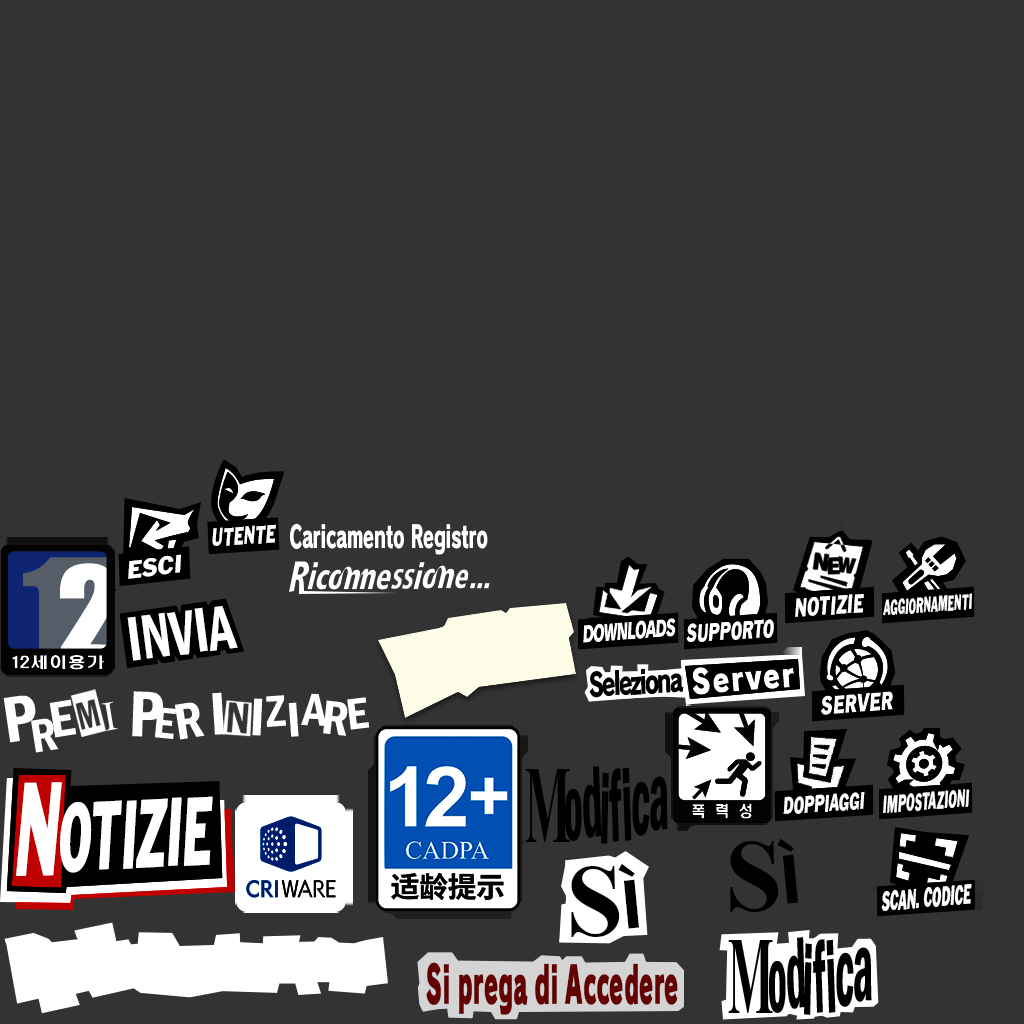
<style>
.page{position:relative;width:1024px;height:1024px;background:#333333}
.page>*{position:absolute;margin:0}
.t1{font:26.4px "FranklinGothicITALIC";color:#ffffff;scale:0.65 1}
.t2{font:30.5px "RodinCattleyaPro-EB";color:#ffffff;scale:0.57 1}
.t3{font:26.2px "FranklinGothicITALIC";color:#ffffff}
.t4{font:22.7px "FranklinGothicITALIC";color:#ffffff;scale:0.5 1}
.t5{font:64.8px "FranklinGothic-DemiCond";color:#ffffff;scale:0.8 1}
.t6{font:27.3px "FranklinGothicITALIC";color:#ffffff;scale:0.69 1}
.t7{font:31.7px "RodinCattleyaPro-EB";letter-spacing:-0.1em;color:#000000;scale:0.69 1}
.t8{font:67.2px "FranklinGothic-DemiCond";color:#ffffff}
.t9{font:52.4px "FranklinGothic-DemiCond";color:#ffffff}
.t10{font:41.7px "TimesNewRomanPSMT";color:#ffffff}
.t11{font:52.5px "FranklinGothic-DemiCond";color:#ffffff}
.t12{font:62.4px "FranklinGothic-DemiCond";color:#ffffff}
.t13{font:54.9px "FranklinGothic-DemiCond";color:#ffffff}
.t14{font:45.9px "FranklinGothic-DemiCond";color:#ffffff;scale:0.91 1}
.t15{font:50.5px "FranklinGothic-DemiCond";color:#ffffff}
.t16{font:47.2px "FranklinGothic-DemiCond";color:#ffffff}
.t17{font:49.5px "FranklinGothic-DemiCond";color:#ffffff}
.t18{font:45.5px "FranklinGothic-DemiCond";color:#ffffff}
.t19{font:48.3px "FranklinGothic-DemiCond";color:#ffffff}
.t20{font:109.9px "TimesNewRomanPS-BoldMT";letter-spacing:-0.1em;color:#000000;scale:0.44 1}
.t21{font:104.3px "FranklinGothic-DemiCond";color:#000000;scale:0.41 1}
.t22{font:105.2px "FranklinGothic-DemiCond";color:#000000;scale:0.41 1}
.t23{font:107.6px "FranklinGothic-DemiCond";color:#000000;scale:0.41 1}
.t24{font:139.1px "FranklinGothicITALIC";color:#ffffff;scale:0.48 1}
.t25{font:104.4px "FranklinGothic-DemiCond";color:#000000;scale:0.41 1}
.t26{font:104.5px "FranklinGothic-DemiCond";color:#000000;scale:0.41 1}
.t27{font:101.3px "FranklinGothicITALIC";color:#ffffff;scale:0.5 1}
.t28{font:100.7px "FranklinGothic-DemiCond";color:#000000;scale:0.41 1}
.t29{font:25.2px "FranklinGothicITALIC";color:#ffffff;scale:0.63 1}
.t30{font:25.5px "FranklinGothicITALIC";color:#ffffff;scale:0.5 1}
.t31{font:103.1px "TimesNewRomanPS-BoldMT";color:#000000}
.t32{font:72px "FranklinGothic-DemiCond";color:#000000}
.t33{font:28.9px "FranklinGothicITALIC";color:#ffffff;scale:0.48 1}
.t34{font:51.3px "RodinCattleyaPro-UB";color:#630000;scale:0.44 1}
</style>
<div class="page">
<p class="t1" style="left:212px;top:524px;width:64px;height:22px;rotate:-3deg">UTENTE</p>
<p class="t2" style="left:290px;top:523px;width:198px;height:32px">Caricamento Registro</p>
<p class="t3" style="left:128px;top:554px;width:53px;height:25px;rotate:-6deg">ESCI</p>
<p class="t4" style="left:883px;top:593px;width:89px;height:23px;rotate:-4deg">AGGIORNAMENTI</p>
<p class="t5" style="left:127px;top:606px;width:111px;height:55px;rotate:-7deg">INVIA</p>
<p class="t6" style="left:795px;top:594px;width:69px;height:23px;rotate:-4deg">NOTIZIE</p>
<p class="t1" style="left:686px;top:619px;width:88px;height:23px;rotate:-3deg">SUPPORTO</p>
<p class="t7" style="left:589px;top:669px;width:95px;height:29px;rotate:-3deg">Seleziona</p>
<p class="t8" style="left:3px;top:695px;width:33px;height:48px;rotate:-8deg">P</p>
<p class="t9" style="left:49px;top:699px;width:28px;height:39px;rotate:-9deg">E</p>
<p class="t10" style="left:101px;top:701px;width:17px;height:30px;rotate:-10deg">I</p>
<p class="t8" style="left:132px;top:691px;width:31px;height:46px;rotate:2deg">P</p>
<p class="t11" style="left:174px;top:702px;width:31px;height:38px;rotate:-9deg">R</p>
<p class="t12" style="left:212px;top:692px;width:12px;height:43px;rotate:-4deg">I</p>
<p class="t13" style="left:252px;top:698px;width:11px;height:38px;rotate:3deg">I</p>
<p class="t14" style="left:266px;top:695px;width:20px;height:32px;rotate:-4deg">Z</p>
<p class="t15" style="left:288px;top:702px;width:11px;height:35px;rotate:-4deg">I</p>
<p class="t16" style="left:301px;top:693px;width:26px;height:33px;rotate:2deg">A</p>
<p class="t17" style="left:323px;top:700px;width:25px;height:36px;rotate:6deg">R</p>
<p class="t18" style="left:347px;top:697px;width:23px;height:33px;rotate:-7deg">E</p>
<p class="t18" style="left:154px;top:707px;width:22px;height:32px;rotate:6deg">E</p>
<p class="t19" style="left:31px;top:718px;width:28px;height:35px;rotate:-9deg">R</p>
<p class="t20" style="left:525px;top:769px;width:45px;height:73px">M</p>
<p class="t21" style="left:583px;top:766px;width:19px;height:72px;rotate:-7deg">d</p>
<p class="t22" style="left:601px;top:772px;width:8px;height:72px;rotate:5deg">i</p>
<p class="t21" style="left:609px;top:768px;width:13px;height:74px;rotate:-7deg">f</p>
<p class="t23" style="left:622px;top:767px;width:10px;height:74px;rotate:-8deg">i</p>
<p class="t24" style="left:16px;top:782px;width:46px;height:94px;rotate:-1deg">N</p>
<p class="t25" style="left:632px;top:781px;width:18px;height:55px;rotate:3deg">c</p>
<p class="t26" style="left:650px;top:776px;width:18px;height:55px;rotate:-2deg">a</p>
<p class="t27" style="left:60px;top:796px;width:153px;height:77px;rotate:-3deg">OTIZIE</p>
<p class="t28" style="left:565px;top:789px;width:17px;height:52px;rotate:-2deg">o</p>
<p class="t29" style="left:783px;top:791px;width:82px;height:23px;rotate:-4deg">DOPPIAGGI</p>
<p class="t30" style="left:883px;top:789px;width:87px;height:24px;rotate:-4deg">IMPOSTAZIONI</p>
<p class="t31" style="left:730px;top:841px;width:49px;height:71px">S</p>
<p class="t32" style="left:777px;top:838px;width:21px;height:66px;rotate:-6deg">Ì</p>
<p class="t31" style="left:571px;top:866px;width:49px;height:71px">S</p>
<p class="t32" style="left:618px;top:863px;width:21px;height:66px;rotate:-6deg">Ì</p>
<p class="t33" style="left:881px;top:883px;width:91px;height:28px;rotate:-5deg">SCAN. CODICE</p>
<p class="t20" style="left:728px;top:940px;width:45px;height:73px">M</p>
<p class="t21" style="left:787px;top:937px;width:19px;height:72px;rotate:-7deg">d</p>
<p class="t21" style="left:813px;top:939px;width:13px;height:74px;rotate:-7deg">f</p>
<p class="t23" style="left:826px;top:939px;width:10px;height:74px;rotate:-8deg">i</p>
<p class="t22" style="left:804px;top:943px;width:8px;height:72px;rotate:5deg">i</p>
<p class="t25" style="left:836px;top:952px;width:18px;height:55px;rotate:3deg">c</p>
<p class="t26" style="left:854px;top:947px;width:18px;height:55px;rotate:-2deg">a</p>
<p class="t34" style="left:426px;top:962px;width:252px;height:53px">Si prega di Accedere</p>
<p class="t28" style="left:769px;top:961px;width:17px;height:52px;rotate:-2deg">o</p>
</div>
